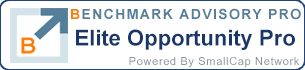
<style>
.page{position:relative;width:305px;height:70px;background:#ffffff}
.page>*{position:absolute;margin:0}
.t1{font:14px "Arial-BoldMT";letter-spacing:0.1em;color:#557f98}
.t2{font:14px "Arial-BoldMT";letter-spacing:0.1em;color:#fe7e00}
.t3{font:22px "Arial-BoldMT";color:#193869}
.t4{font:11px "HelveticaTTF";letter-spacing:0.06em;color:#89919d}
</style>
<div class="page">
<p class="t1" style="left:71px;top:8px;width:230px;height:12px"><span class="t2">B</span>ENCHMARK ADVISORY PRO</p>
<p class="t3" style="left:76px;top:29px;width:219px;height:21px">Elite Opportunity Pro</p>
<p class="t4" style="left:129px;top:57px;width:171px;height:11px">Powered By SmallCap Network</p>
</div>
